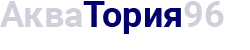
<style>
.page{position:relative;width:250px;height:50px;background:#ffffff}
.page>*{position:absolute;margin:0}
.t1{font:36px "Roboto-Bold";color:#01016b}
.t2{font:36px "Roboto-Bold";color:#d0d0db}
</style>
<div class="page">
<p class="t1" style="left:0px;top:1px;width:224px;height:33px"><span class="t2">Аква</span>Тория<span class="t2">96</span></p>
</div>
